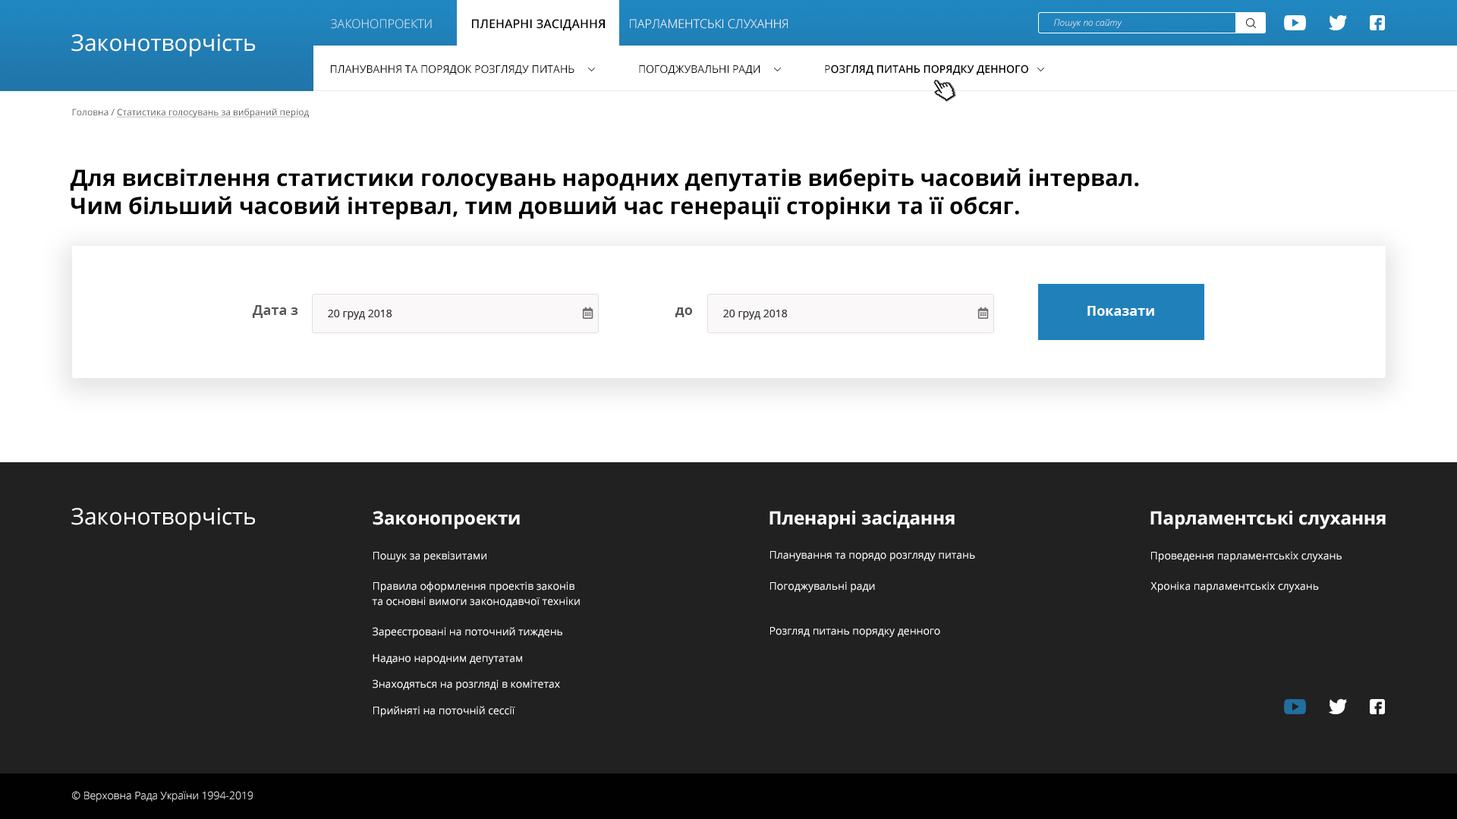
<style>
.page{position:relative;width:1457px;height:819px;background:#ffffff}
.page>*{position:absolute;margin:0}
.t1{font:12.1px "OpenSans-Light";color:#dee9f2;text-transform:uppercase}
.t2{font:12.1px "OpenSans-SemiBold";color:#000000;text-transform:uppercase}
.t3{font:12.1px "OpenSans-Light";color:#ffffff;text-transform:uppercase}
.t4{font:9.1px "OpenSans-LightItalic";color:#ffffff}
.t5{font:22.8px "OpenSans-Regular";color:#ffffff}
.t6{font:10.6px "OpenSans-Regular";color:#000000}
.t7{font:10.6px "OpenSans-SemiBold";color:#000000}
.t8{font:9.1px "OpenSans-Regular";color:#585858;text-decoration:underline}
.t9{font:9.1px "OpenSans-Regular";color:#585858}
.t10{font:22.8px/28.1px "OpenSans-Bold";color:#000000}
.t11{font:13.7px "OpenSans-Bold";color:#585858}
.t12{font:13.7px "OpenSans-Bold";color:#ffffff}
.t13{font:10.6px "OpenSans";color:#323232}
.t14{font:18.2px "OpenSans-Bold";color:#ffffff}
.t15{font:10.6px "OpenSans-Regular";color:#ffffff}
.t16{font:10.6px/15.2px "OpenSans-Regular";color:#ffffff}
.t17{font:10.6px/19.7px "OpenSans-Regular";color:#ffffff}
.t18{font:10.6px "OpenSans-Light";color:#ffffff}
</style>
<div class="page">
<p class="t1" style="left:331px;top:19px;width:101px;height:10px">Законопроекти</p>
<p class="t2" style="left:472px;top:19px;width:133px;height:12px">пленарні засідання</p>
<p class="t3" style="left:630px;top:19px;width:158px;height:10px">парламентські слухання</p>
<p class="t4" style="left:1054px;top:19px;width:68px;height:9px">Пошук по сайту</p>
<p class="t5" style="left:71px;top:34px;width:184px;height:23px">Законотворчість</p>
<p class="t6" style="left:331px;top:64px;width:697px;height:11px">ПЛАНУВАННЯ ТА ПОРЯДОК РОЗГЛЯДУ ПИТАНЬ                       ПОГОДЖУВАЛЬНІ РАДИ                       Р<span class="t7">ОЗГЛЯД ПИТАНЬ ПОРЯДКУ ДЕННОГО</span></p>
<p class="t8" style="left:72px;top:108px;width:238px;height:10px"><span class="t9">Головна / </span>Статистика голосувань за вибраний період</p>
<p class="t10" style="left:70px;top:168px;width:1069px;height:52px">Для висвітлення статистики голосувань народних депутатів виберіть часовий інтервал.<br>Чим більший часовий інтервал, тим довший час генерації сторінки та її обсяг.</p>
<p class="t11" style="left:252px;top:305px;width:46px;height:13px">Дата з</p>
<p class="t12" style="left:1087px;top:306px;width:67px;height:10px">Показати</p>
<p class="t13" style="left:328px;top:310px;width:64px;height:9px">20 груд 2018</p>
<p class="t11" style="left:675px;top:307px;width:18px;height:10px">до</p>
<p class="t13" style="left:723px;top:310px;width:65px;height:9px">20 груд 2018</p>
<p class="t5" style="left:71px;top:508px;width:184px;height:22px">Законотворчість</p>
<p class="t14" style="left:769px;top:510px;width:185px;height:19px">Пленарні засідання</p>
<p class="t14" style="left:1150px;top:510px;width:235px;height:19px">Парламентські слухання</p>
<p class="t14" style="left:373px;top:511px;width:147px;height:18px">Законопроекти</p>
<p class="t15" style="left:373px;top:551px;width:113px;height:11px">Пошук за реквізитами</p>
<p class="t15" style="left:770px;top:551px;width:205px;height:10px">Планування та порядо розгляду питань</p>
<p class="t15" style="left:1151px;top:551px;width:190px;height:11px">Проведення парламентськіх слухань</p>
<p class="t16" style="left:372px;top:581px;width:208px;height:26px"><span class="t17">Правила оформлення проектів законів<br></span>та основні вимоги законодавчої техніки</p>
<p class="t15" style="left:770px;top:581px;width:105px;height:12px">Погоджувальні ради</p>
<p class="t15" style="left:1150px;top:581px;width:169px;height:12px">Хроніка парламентськіх слухань</p>
<p class="t15" style="left:373px;top:627px;width:189px;height:11px">Зареєстровані на поточний тиждень</p>
<p class="t15" style="left:770px;top:627px;width:170px;height:10px">Розгляд питань порядку денного</p>
<p class="t15" style="left:373px;top:654px;width:149px;height:11px">Надано народним депутатам</p>
<p class="t15" style="left:373px;top:679px;width:187px;height:11px">Знаходяться на розгляді в комітетах</p>
<p class="t15" style="left:373px;top:706px;width:142px;height:11px">Прийняті на поточній сессії</p>
<p class="t18" style="left:72px;top:791px;width:181px;height:11px">© Верховна Рада України 1994-2019</p>
</div>
